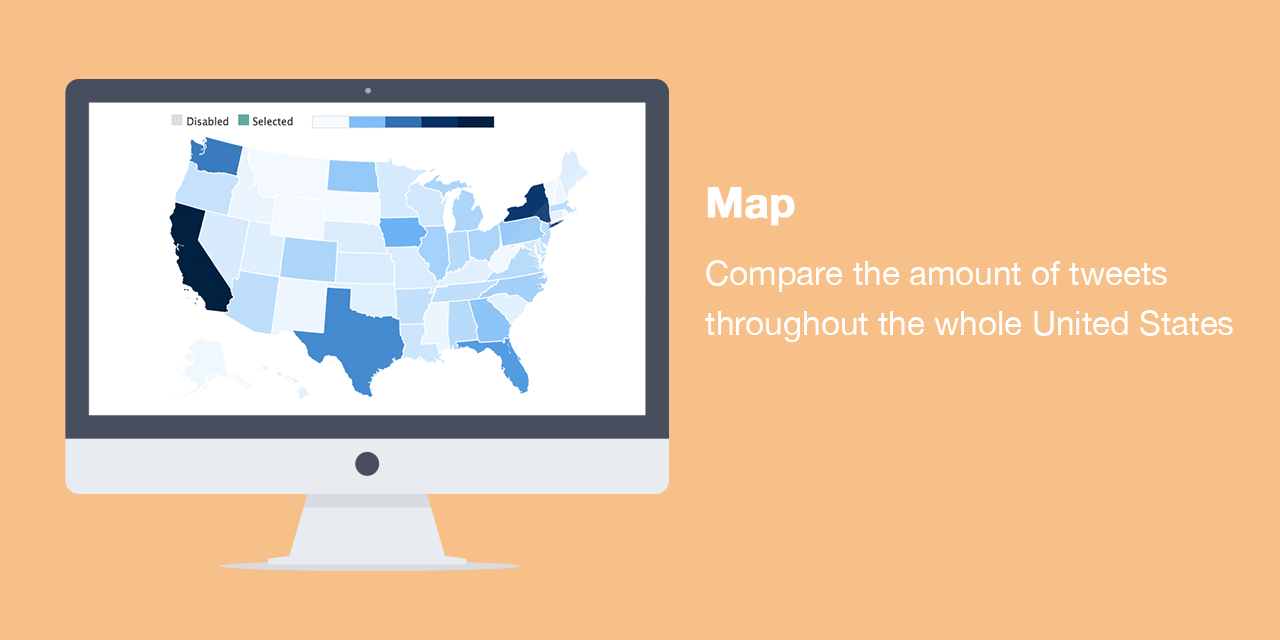
<style>
.page{position:relative;width:1280px;height:640px;background:#f6c088}
.page>*{position:absolute;margin:0}
.t1{font:33.3px/50px "HelveticaNeue";color:#ffffff}
.t2{font:41.7px/75px "HelveticaNeue-Bold";color:#ffffff;font-weight:bold}
</style>
<div class="page">
<p class="t1" style="left:705px;top:187px;width:528px;height:155px"><span class="t2">Map<br></span>Compare the amount of tweets throughout the whole United States</p>
</div>
